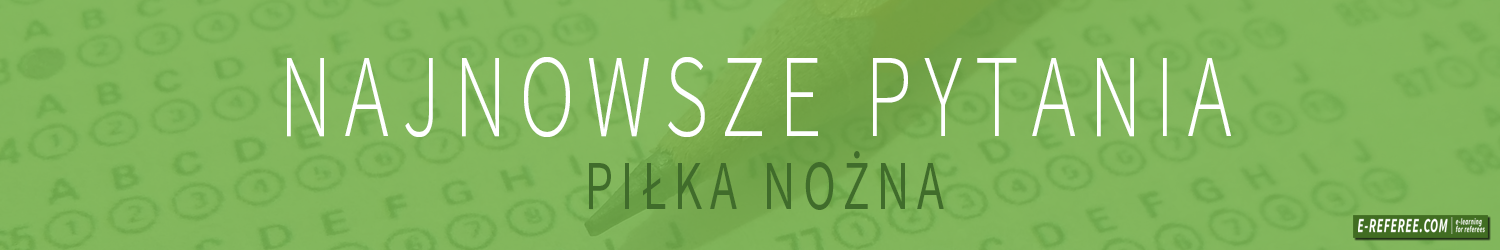
<style>
.page{position:relative;width:1500px;height:250px}
.page>*{position:absolute;margin:0}
.t1{font:118.4px "SourceSansPro-Light";letter-spacing:0.16em;color:#ffffff;scale:0.71 1}
.t2{font:97.8px "SourceSansPro-Light";letter-spacing:0.16em;color:#416d23;scale:0.71 1}
.t3{font:70.5px "SourceSansPro-Regular";letter-spacing:0.16em;color:#406c2b;scale:0.71 1}
</style>
<div class="page">
<p class="t1" style="left:287px;top:57px;width:944px;height:80px">NAJNOWSZE PYTANIA<br><span class="t2"></span></p>
<p class="t3" style="left:589px;top:151px;width:355px;height:59px">PIŁKA NOŻNA</p>
</div>
